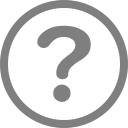
<style>
.page{position:relative;width:128px;height:128px;background:#ffffff}
.page>*{position:absolute;margin:0}
.t1{font:100px "UDDigiKyokashoNK-B";color:#7f7f7f}
</style>
<div class="page">
<p class="t1" style="left:37px;top:25px;width:54px;height:77px">?</p>
</div>
